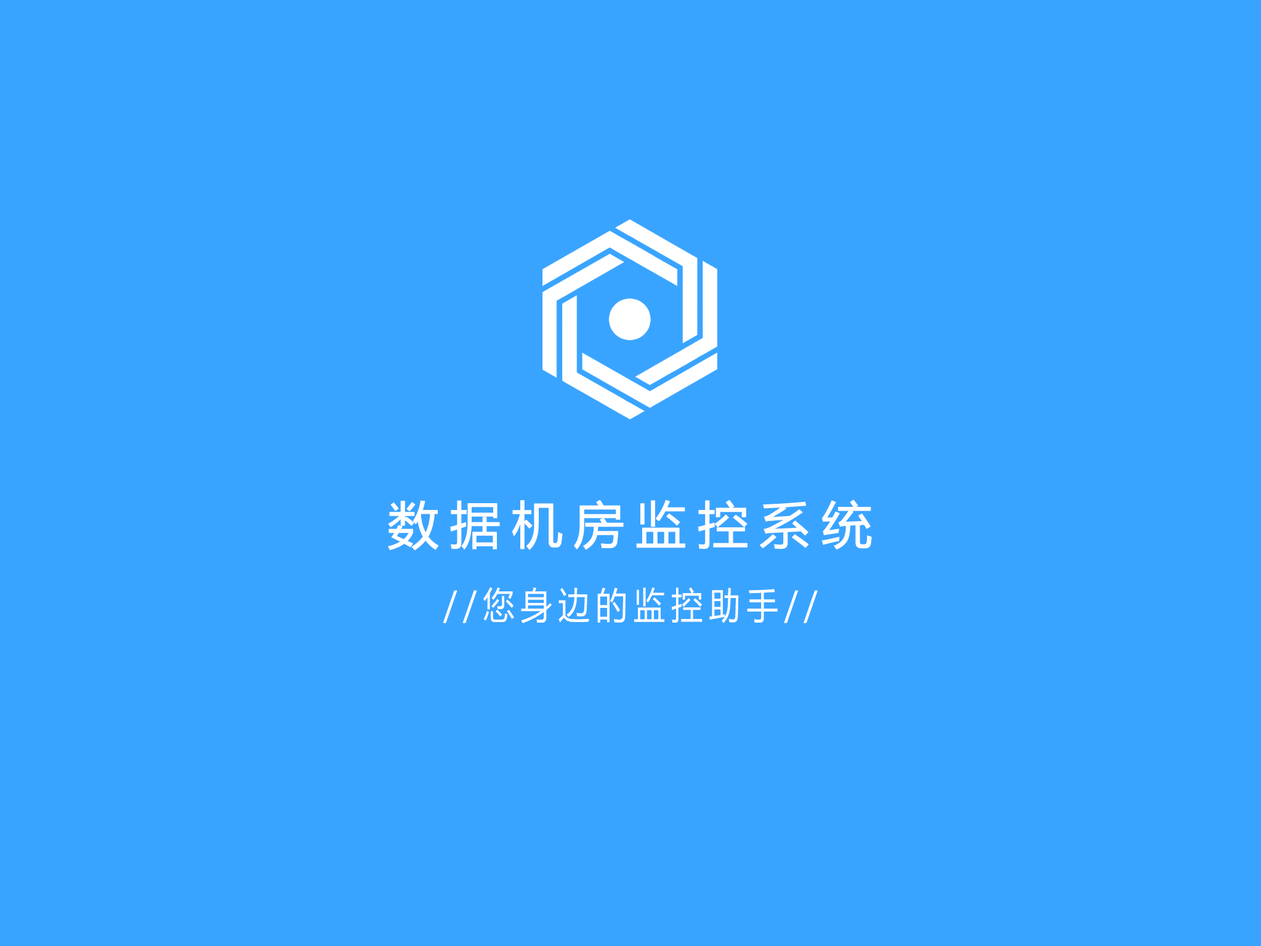
<style>
.page{position:relative;width:1261px;height:946px;background:#39a4ff}
.page>*{position:absolute;margin:0}
.t1{font:50.5px "MicrosoftYaHeiUI";letter-spacing:0.2em;color:#ffffff;font-weight:bold}
.t2{font:36.9px "MicrosoftYaHeiUI";letter-spacing:0.2em;color:#ffffff;scale:0.85 1}
</style>
<div class="page">
<p class="t1" style="left:388px;top:499px;width:484px;height:51px">数据机房监控系统</p>
<p class="t2" style="left:443px;top:587px;width:375px;height:36px">//您身边的监控助手//</p>
</div>
